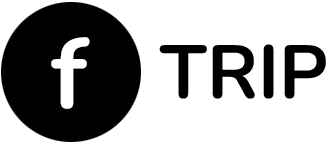
<style>
.page{position:relative;width:327px;height:144px;background:#ffffff}
.page>*{position:absolute;margin:0}
.t1{font:100px "Nunito-Bold";color:#ffffff}
.t2{font:75px "Nunito-Bold";color:#000000}
</style>
<div class="page">
<p class="t1" style="left:51px;top:37px;width:39px;height:72px">f</p>
<p class="t2" style="left:159px;top:44px;width:167px;height:55px">TRIP</p>
</div>
